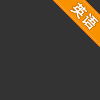
<style>
.page{position:relative;width:100px;height:100px;background:#333333}
.page>*{position:absolute;margin:0}
.t1{font:13px "MicrosoftYaHei";letter-spacing:0.2em;color:#ffffff}
</style>
<div class="page">
<p class="t1" style="left:70px;top:2px;width:29px;height:28px;rotate:45deg">英语</p>
<p class="t1" style="left:70px;top:2px;width:29px;height:28px;rotate:45deg">英语</p>
</div>
